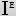
<style>
.page{position:relative;width:16px;height:16px}
.page>*{position:absolute;margin:0}
.t1{font:20.8px "TimesNewRomanPSMT";color:#000000}
.t2{font:8.3px "TimesNewRomanPSMT";color:#000000}
</style>
<div class="page">
<p class="t1" style="left:1px;top:1px;width:8px;height:14px">I</p>
<p class="t2" style="left:9px;top:2px;width:6px;height:6px">E</p>
</div>
